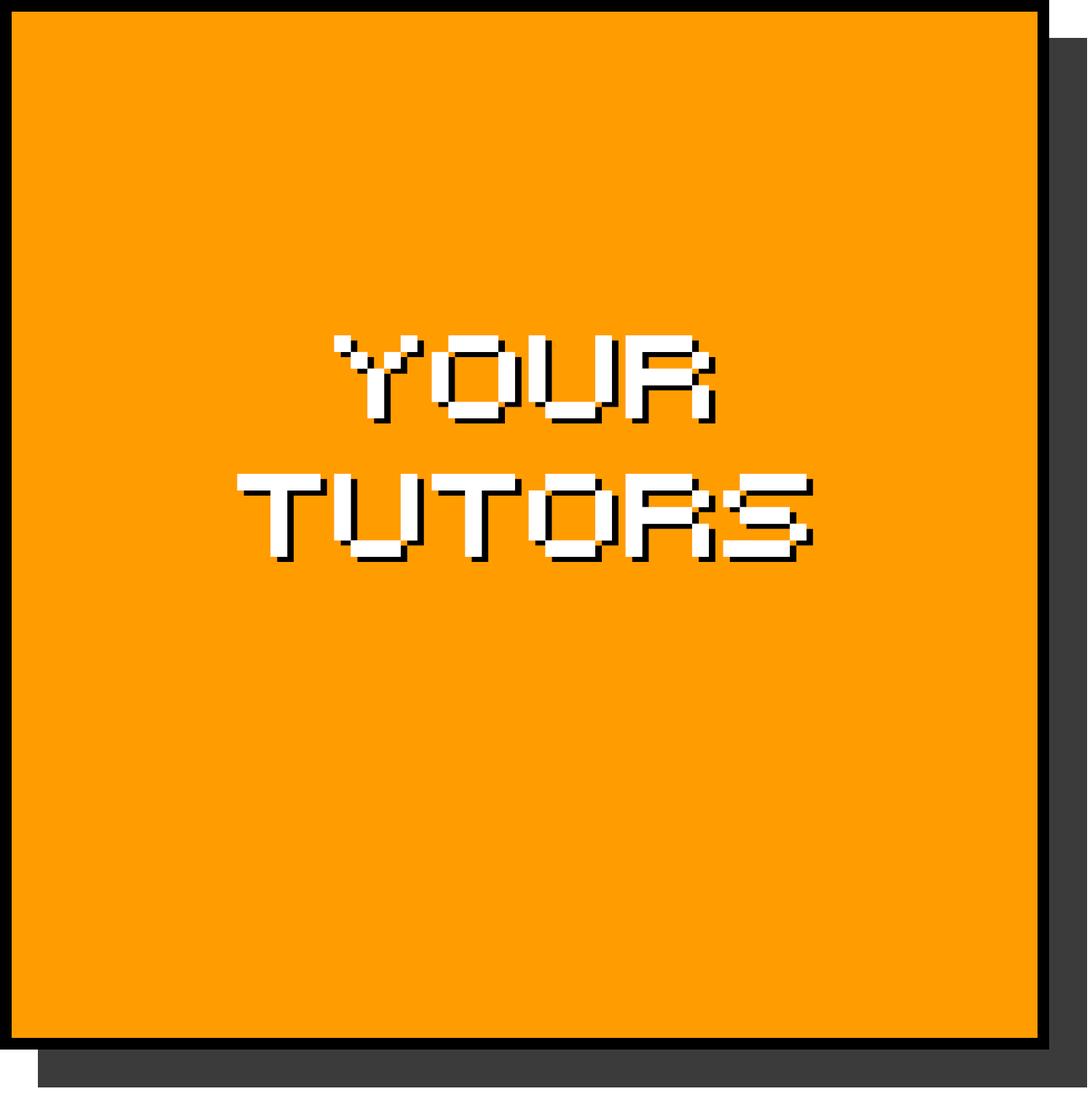
<style>
.page{position:relative;width:1090px;height:1094px;background:#ff9c00}
.page>*{position:absolute;margin:0}
.t1{font:115.1px "RetroComputer";color:#ffffff}
.t2{font:115.1px "RetroComputer"}
</style>
<div class="page">
<p class="t1" style="left:237px;top:335px;width:570px;height:222px;text-align:center">your<br>tutors</p>
<p class="t2" style="left:243px;top:340px;width:570px;height:222px;text-align:center">your<br>tutors</p>
</div>
